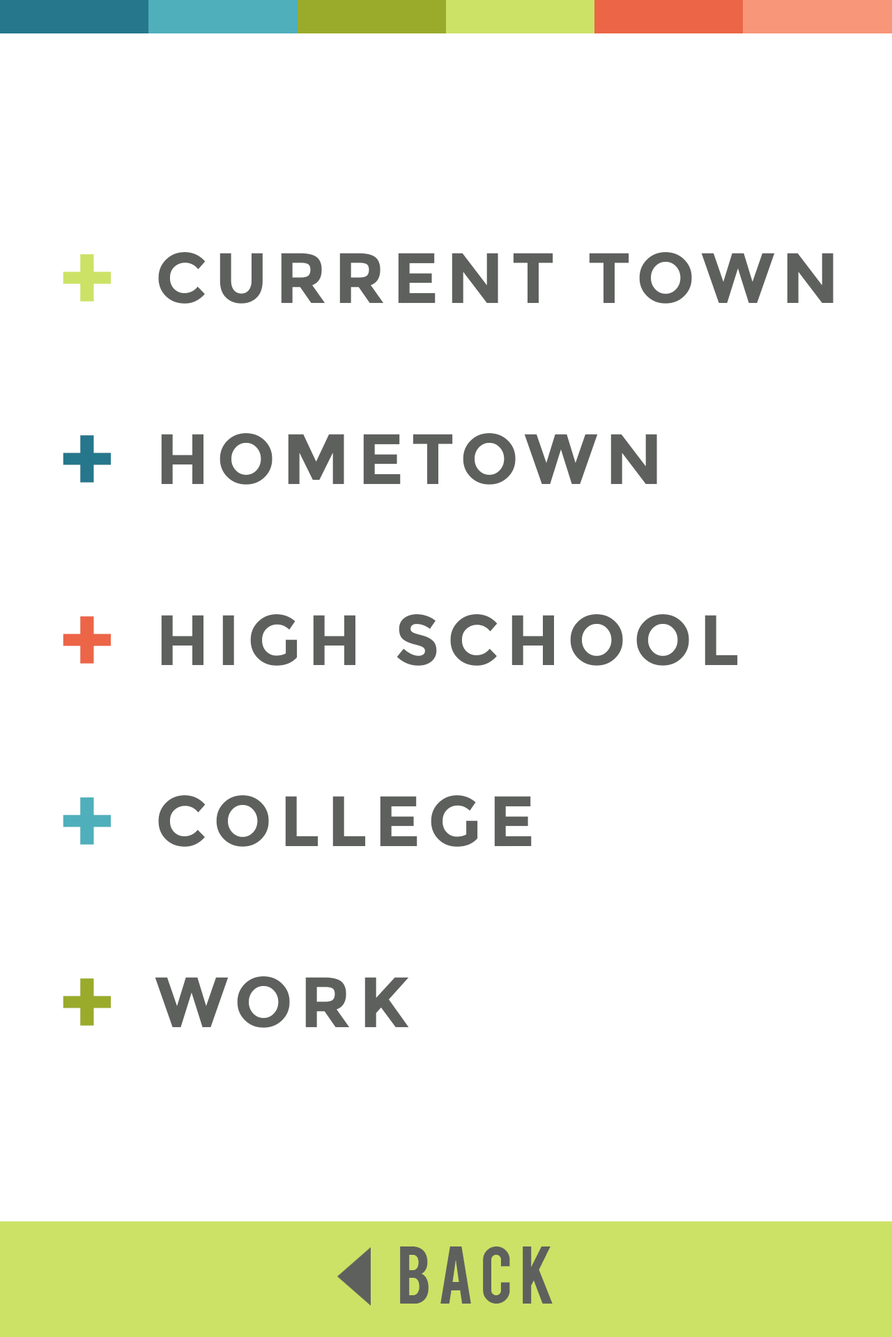
<style>
.page{position:relative;width:892px;height:1337px;background:#ffffff}
.page>*{position:absolute;margin:0}
.t1{font:97.5px/90.6px "Montserrat-Bold";letter-spacing:0.1em;color:#cce266}
.t2{font:97.5px/90.6px "Montserrat-Bold";letter-spacing:0.1em;color:#26778c}
.t3{font:97.5px/90.6px "Montserrat-Bold";letter-spacing:0.1em;color:#ec6547}
.t4{font:97.5px/90.6px "Montserrat-Bold";letter-spacing:0.1em;color:#4fafbb}
.t5{font:97.5px/90.6px "Montserrat-Bold";letter-spacing:0.1em;color:#9aab2b}
.t6{font:71px/90.6px "Montserrat-Bold";letter-spacing:0.1em;color:#5e605e}
.t7{font:62.7px "Bebas";letter-spacing:0.1em;color:#5e605e}
</style>
<div class="page">
<p class="t1" style="left:63px;top:254px;width:48px;height:772px">+ <br><br><span class="t2">+ <br><br></span><span class="t3">+ <br><br></span><span class="t4">+ <br><br></span><span class="t5">+</span></p>
<p class="t6" style="left:155px;top:252px;width:678px;height:776px">CURRENT TOWN<br><br>HOMETOWN<br><br>HIGH SCHOOL<br><br>COLLEGE<br><br>WORK</p>
<p class="t7" style="left:400px;top:1247px;width:152px;height:57px">BACK</p>
</div>
